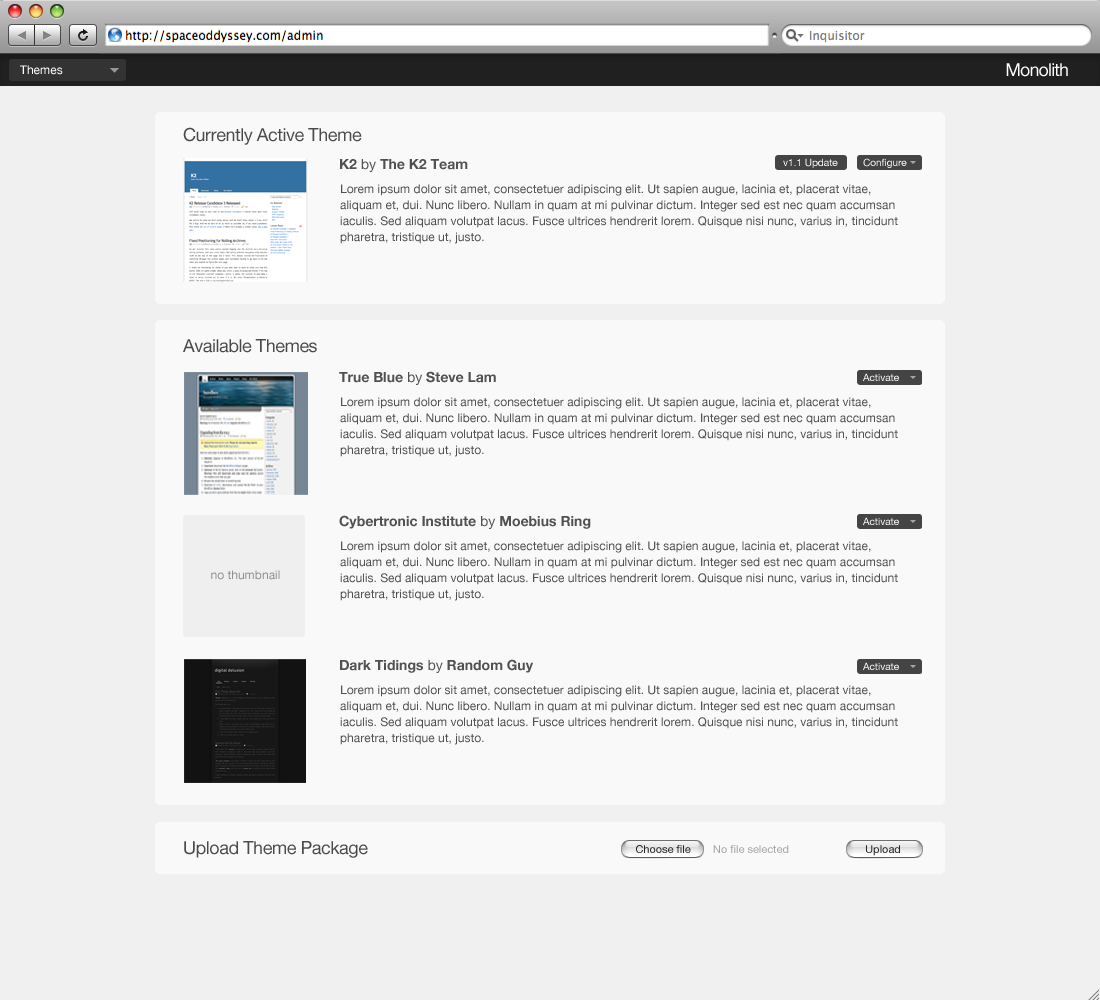
<style>
.page{position:relative;width:1100px;height:1000px;background:#f9f9f9}
.page>*{position:absolute;margin:0}
.t1{font:12px "HelveticaNeue";color:#ffffff}
.t2{font:18px "HelveticaNeue";letter-spacing:-0.05em;color:#ffffff}
.t3{font:18px "HelveticaNeue";letter-spacing:-0.025em;color:#4a4a4a}
.t4{font:14px "HelveticaNeue-Bold";color:#525151}
.t5{font:14px "HelveticaNeue";color:#525151}
.t6{font:10px "HelveticaNeue";color:#ffffff}
.t7{font:12px/16px "HelveticaNeue";color:#525151}
.t8{font:10px "HelveticaNeue";color:#fffefe}
.t9{font:12px "HelveticaNeue";color:#919090}
.t10{font:11px "HelveticaNeue";color:#242424}
.t11{font:11px "HelveticaNeue";color:#a4a4a4}
</style>
<div class="page">
<p class="t1" style="left:20px;top:65px;width:43px;height:10px">Themes</p>
<p class="t2" style="left:1006px;top:63px;width:62px;height:14px">Monolith</p>
<p class="t3" style="left:183px;top:127px;width:179px;height:18px">Currently Active Theme</p>
<p class="t4" style="left:340px;top:159px;width:128px;height:13px">K2 <span class="t5">by </span>The K2 Team</p>
<p class="t6" style="left:783px;top:158px;width:55px;height:10px">v1.1 Update</p>
<p class="t6" style="left:863px;top:158px;width:44px;height:10px">Configure</p>
<p class="t7" style="left:340px;top:184px;width:558px;height:60px">Lorem ipsum dolor sit amet, consectetuer adipiscing elit. Ut sapien augue, lacinia et, placerat vitae, aliquam et, dui. Nunc libero. Nullam in quam at mi pulvinar dictum. Integer sed est nec quam accumsan iaculis. Sed aliquam volutpat lacus. Fusce ultrices hendrerit lorem. Quisque nisi nunc, varius in, tincidunt pharetra, tristique ut, justo.</p>
<p class="t3" style="left:183px;top:339px;width:134px;height:14px">Available Themes</p>
<p class="t4" style="left:339px;top:371px;width:157px;height:14px">True Blue<span class="t5"> by </span>Steve Lam</p>
<p class="t6" style="left:863px;top:373px;width:36px;height:8px">Activate</p>
<p class="t7" style="left:340px;top:397px;width:558px;height:60px">Lorem ipsum dolor sit amet, consectetuer adipiscing elit. Ut sapien augue, lacinia et, placerat vitae, aliquam et, dui. Nunc libero. Nullam in quam at mi pulvinar dictum. Integer sed est nec quam accumsan iaculis. Sed aliquam volutpat lacus. Fusce ultrices hendrerit lorem. Quisque nisi nunc, varius in, tincidunt pharetra, tristique ut, justo.</p>
<p class="t4" style="left:339px;top:515px;width:252px;height:14px">Cybertronic Institute<span class="t5"> by </span>Moebius Ring</p>
<p class="t8" style="left:863px;top:517px;width:36px;height:8px">Activate</p>
<p class="t7" style="left:340px;top:541px;width:558px;height:60px">Lorem ipsum dolor sit amet, consectetuer adipiscing elit. Ut sapien augue, lacinia et, placerat vitae, aliquam et, dui. Nunc libero. Nullam in quam at mi pulvinar dictum. Integer sed est nec quam accumsan iaculis. Sed aliquam volutpat lacus. Fusce ultrices hendrerit lorem. Quisque nisi nunc, varius in, tincidunt pharetra, tristique ut, justo.</p>
<p class="t9" style="left:211px;top:570px;width:69px;height:10px">no thumbnail</p>
<p class="t4" style="left:340px;top:659px;width:193px;height:14px">Dark Tidings<span class="t5"> by </span>Random Guy</p>
<p class="t6" style="left:863px;top:662px;width:36px;height:8px">Activate</p>
<p class="t7" style="left:340px;top:685px;width:558px;height:60px">Lorem ipsum dolor sit amet, consectetuer adipiscing elit. Ut sapien augue, lacinia et, placerat vitae, aliquam et, dui. Nunc libero. Nullam in quam at mi pulvinar dictum. Integer sed est nec quam accumsan iaculis. Sed aliquam volutpat lacus. Fusce ultrices hendrerit lorem. Quisque nisi nunc, varius in, tincidunt pharetra, tristique ut, justo.</p>
<p class="t3" style="left:184px;top:841px;width:184px;height:17px">Upload Theme Package</p>
<p class="t10" style="left:636px;top:845px;width:55px;height:8px">Choose file</p>
<p class="t11" style="left:713px;top:845px;width:76px;height:8px">No file selected</p>
<p class="t10" style="left:866px;top:845px;width:34px;height:11px">Upload</p>
</div>
